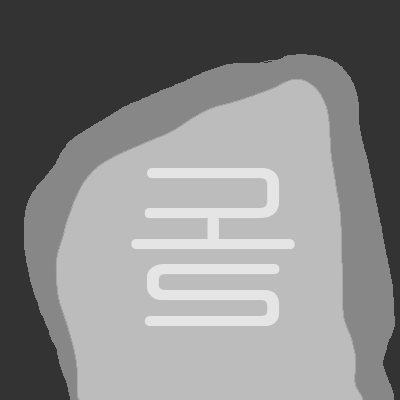
<style>
.page{position:relative;width:400px;height:400px;background:#bcbcbc}
.page>*{position:absolute;margin:0}
.t1{font:200px "Gulim";color:#e5e5e5}
</style>
<div class="page">
<p class="t1" style="left:131px;top:168px;width:164px;height:158px;rotate:180deg">돌</p>
</div>
